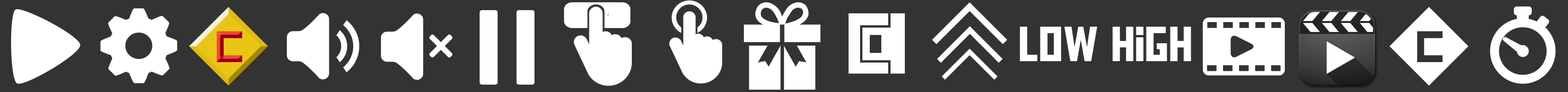
<style>
.page{position:relative;width:1568px;height:92px;background:#333333}
.page>*{position:absolute;margin:0}
.t1{font:48.9px "AldotheApache";color:#ffffff}
</style>
<div class="page">
<p class="t1" style="left:1020px;top:27px;width:77px;height:34px">LOW</p>
<p class="t1" style="left:1112px;top:27px;width:79px;height:34px">high</p>
</div>
